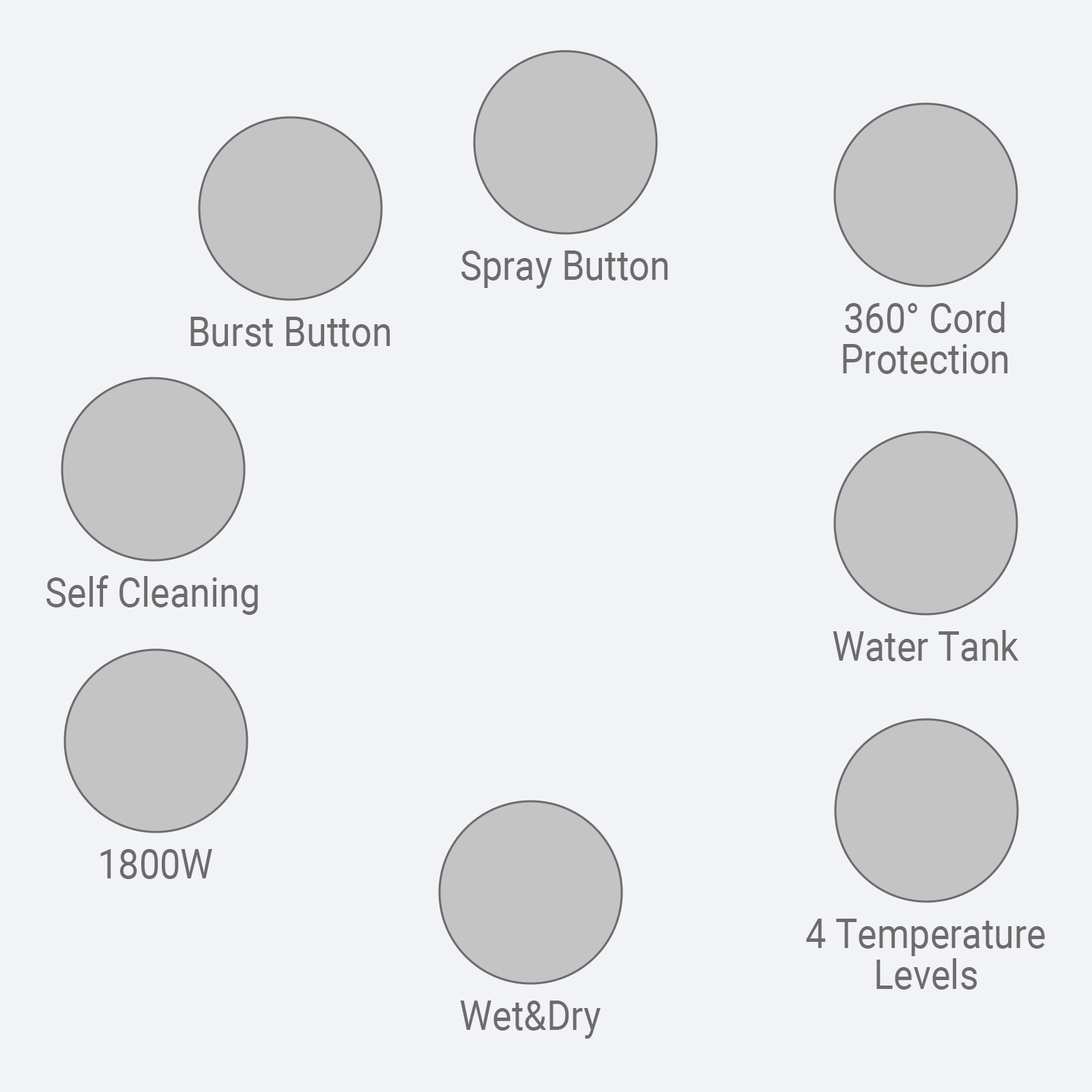
<style>
.page{position:relative;width:1092px;height:1092px;background:#f2f3f6}
.page>*{position:absolute;margin:0}
.t1{font:40.9px "Roboto-Regular";color:#6c6c6c;scale:0.9 1}
.t2{font:40.9px/40.9px "Roboto-Regular";color:#6c6c6c;scale:0.9 1}
</style>
<div class="page">
<p class="t1" style="left:461px;top:250px;width:207px;height:39px">Spray Button</p>
<p class="t2" style="left:843px;top:302px;width:165px;height:72px;text-align:center">360° Cord<br>Protection</p>
<p class="t1" style="left:190px;top:317px;width:200px;height:30px">Burst Button</p>
<p class="t1" style="left:46px;top:575px;width:212px;height:40px">Self Cleaning</p>
<p class="t1" style="left:833px;top:630px;width:186px;height:31px">Water Tank</p>
<p class="t1" style="left:100px;top:849px;width:112px;height:30px">1800W</p>
<p class="t2" style="left:806px;top:919px;width:239px;height:71px;text-align:center">4 Temperature<br>Levels</p>
<p class="t1" style="left:460px;top:1001px;width:141px;height:38px">Wet&amp;Dry</p>
</div>
